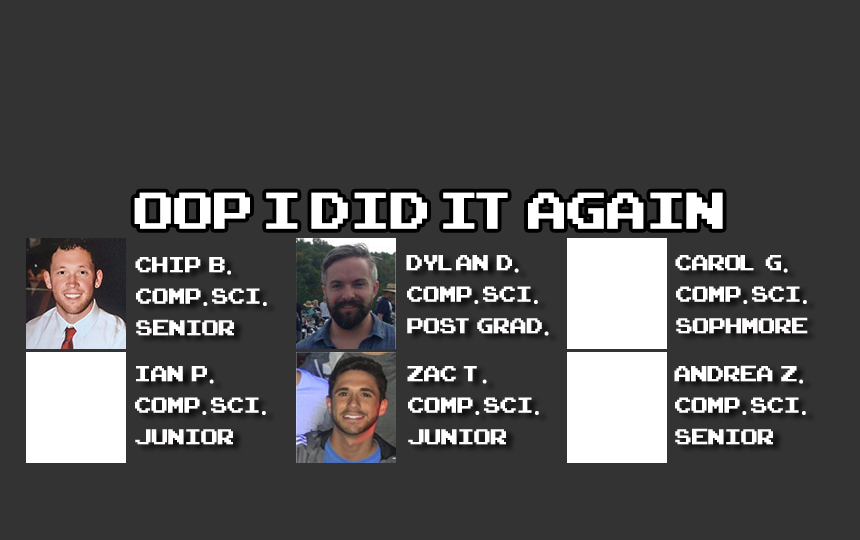
<style>
.page{position:relative;width:860px;height:540px;background:#333333}
.page>*{position:absolute;margin:0}
.t1{font:72px "ArcadeClassic";color:#ffffff}
.t2{font:30px "ArcadeClassic";color:#ffffff}
.t3{font:30px "MyriadPro-Regular";color:#ffffff}
.t4{font:30px "ArcadeClassic";color:#fdfbfb}
.t5{font:30px "MyriadPro-Regular";color:#fdfbfb}
</style>
<div class="page">
<p class="t1" style="left:134px;top:192px;width:589px;height:37px">OOP I DID IT AGAIN</p>
<p class="t2" style="left:135px;top:257px;width:96px;height:18px">Chip  B<span class="t3">.</span></p>
<p class="t2" style="left:406px;top:255px;width:113px;height:18px">DYLAN  D<span class="t3">.</span></p>
<p class="t2" style="left:675px;top:255px;width:113px;height:18px">CAROL  G<span class="t3">.</span></p>
<p class="t2" style="left:136px;top:288px;width:131px;height:18px">COMP<span class="t3">.</span> SCI<span class="t3">.</span></p>
<p class="t2" style="left:407px;top:286px;width:131px;height:18px">COMP<span class="t3">.</span> SCI<span class="t3">.</span></p>
<p class="t2" style="left:676px;top:286px;width:131px;height:18px">COMP<span class="t3">.</span> SCI<span class="t3">.</span></p>
<p class="t4" style="left:407px;top:318px;width:142px;height:18px">POST GRAD<span class="t5">.</span></p>
<p class="t4" style="left:676px;top:317px;width:132px;height:17px">SOPHMORE</p>
<p class="t4" style="left:136px;top:319px;width:98px;height:17px">Senior</p>
<p class="t2" style="left:136px;top:366px;width:78px;height:18px">IAN  P<span class="t3">.</span></p>
<p class="t2" style="left:407px;top:366px;width:80px;height:18px">ZAC  T<span class="t3">.</span></p>
<p class="t2" style="left:674px;top:365px;width:129px;height:19px">Andrea  Z<span class="t3">.</span></p>
<p class="t2" style="left:135px;top:397px;width:131px;height:18px">COMP<span class="t3">.</span> SCI<span class="t3">.</span></p>
<p class="t2" style="left:408px;top:397px;width:131px;height:18px">COMP<span class="t3">.</span> SCI<span class="t3">.</span></p>
<p class="t2" style="left:675px;top:397px;width:131px;height:18px">COMP<span class="t3">.</span> SCI<span class="t3">.</span></p>
<p class="t4" style="left:135px;top:429px;width:98px;height:16px">JUNIOR</p>
<p class="t4" style="left:408px;top:429px;width:98px;height:16px">JUnior</p>
<p class="t4" style="left:675px;top:428px;width:98px;height:17px">Senior</p>
</div>
